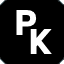
<style>
.page{position:relative;width:64px;height:64px;background:#000000}
.page>*{position:absolute;margin:0}
.t1{font:33px "Biryani-Black";color:#ffffff}
</style>
<div class="page">
<p class="t1" style="left:16px;top:9px;width:21px;height:26px">P</p>
<p class="t1" style="left:30px;top:28px;width:22px;height:26px">K</p>
</div>
